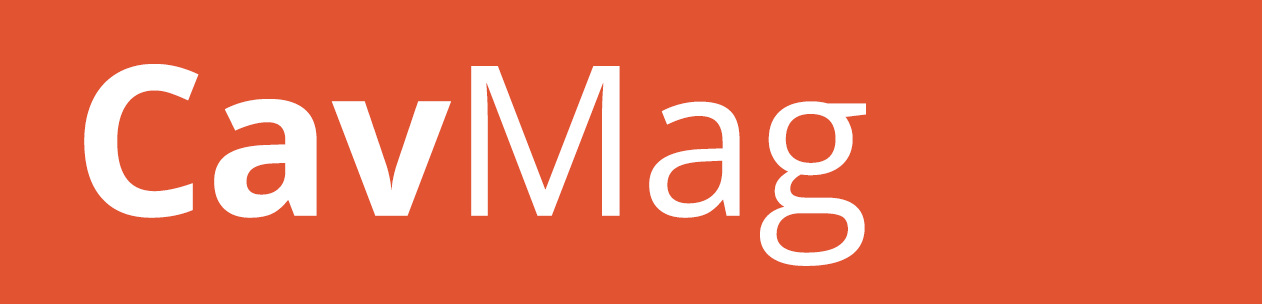
<style>
.page{position:relative;width:1262px;height:304px;background:#e25431}
.page>*{position:absolute;margin:0}
.t1{font:209.2px "OpenSans-Bold";color:#ffffff}
.t2{font:209.2px "OpenSans";color:#ffffff}
</style>
<div class="page">
<p class="t1" style="left:84px;top:64px;width:782px;height:202px">Cav<span class="t2">Mag</span></p>
</div>
